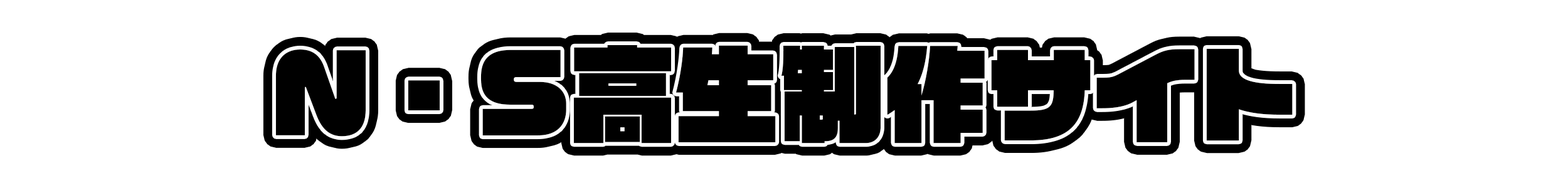
<style>
.page{position:relative;width:1568px;height:188px;background:#ffffff}
.page>*{position:absolute;margin:0}
.t1{font:104.5px "VDL-LogoJrBlack-Black";color:#000000}
</style>
<div class="page">
<p class="t1" style="left:275px;top:45px;width:1018px;height:99px">N・S高生制作サイト</p>
</div>
